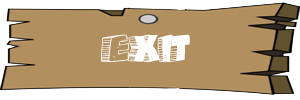
<style>
.page{position:relative;width:300px;height:100px;background:#b18f5f}
.page>*{position:absolute;margin:0}
.t1{font:27px "Caveman";color:#ffffff}
</style>
<div class="page">
<p class="t1" style="left:101px;top:34px;width:89px;height:28px">Exit</p>
</div>
